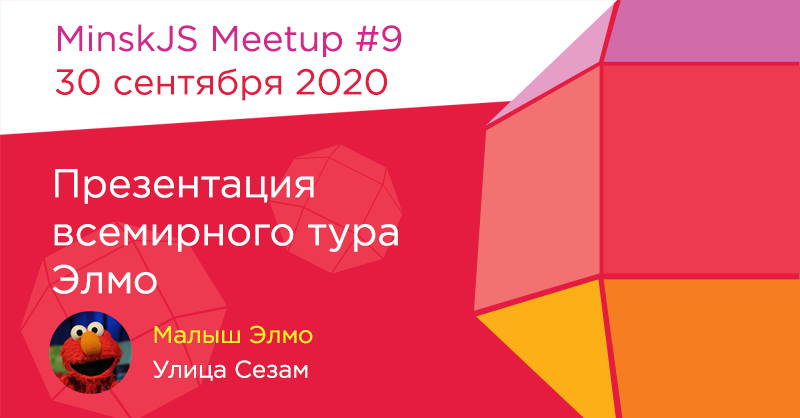
<style>
.page{position:relative;width:800px;height:418px;background:#e41c40}
.page>*{position:absolute;margin:0}
.t1{font:36px "GothamPro";color:#d32789}
.t2{font:36px "GothamPro";color:#e31d40}
.t3{font:40px "GothamPro";color:#ffffff}
.t4{font:24px "GothamPro";color:#fff222}
.t5{font:24px "GothamPro";color:#fefefe}
</style>
<div class="page">
<p class="t1" style="left:58px;top:24px;width:344px;height:33px">MinskJS Meetup #9</p>
<p class="t2" style="left:55px;top:68px;width:332px;height:33px">30 сентября 2020</p>
<p class="t3" style="left:52px;top:169px;width:346px;height:125px">Презентация <br>всемирного тура <br>Элмо</p>
<p class="t4" style="left:154px;top:325px;width:159px;height:19px">Малыш Элмо</p>
<p class="t5" style="left:153px;top:360px;width:155px;height:21px">Улица Сезам</p>
</div>
